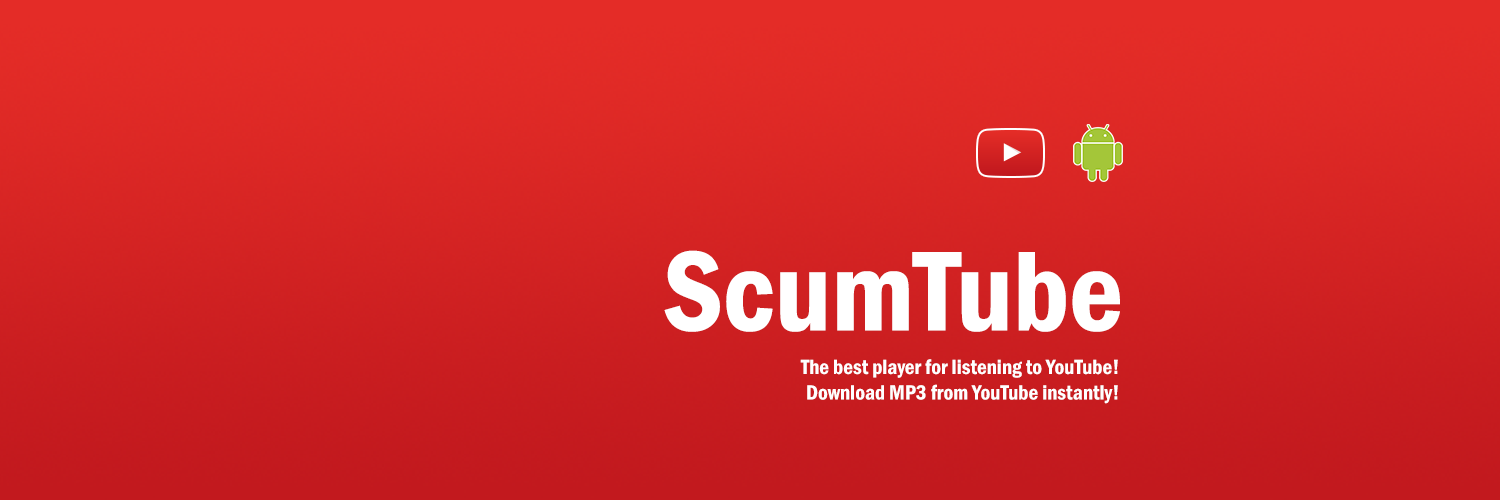
<style>
.page{position:relative;width:1500px;height:500px}
.page>*{position:absolute;margin:0}
.t1{font:117.8px "FranklinGothic-DemiCond";color:#ffffff}
.t2{font:21.2px "FranklinGothic-DemiCond";color:#ffffff}
</style>
<div class="page">
<p class="t1" style="left:664px;top:250px;width:456px;height:82px">ScumTube</p>
<p class="t2" style="left:800px;top:359px;width:318px;height:45px;text-align:right">The best player for listening to YouTube!<br>Download MP3 from YouTube instantly!</p>
</div>
